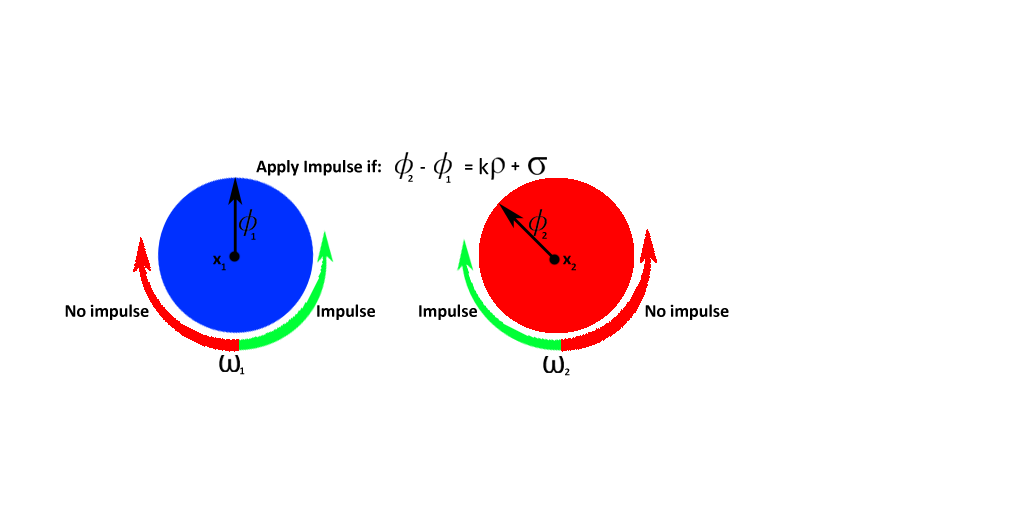
<style>
.page{position:relative;width:1024px;height:512px;background:#ffffff}
.page>*{position:absolute;margin:0}
.t1{font:18px "Calibri-Bold";color:#000000}
.t2{font:24px "Calibri";color:#000000}
</style>
<div class="page">
<p class="t1" style="left:256px;top:159px;width:125px;height:17px">Apply Impulse if:</p>
<p class="t2" style="left:479px;top:158px;width:10px;height:17px">k</p>
<p class="t1" style="left:420px;top:164px;width:53px;height:6px">-   =</p>
<p class="t1" style="left:511px;top:162px;width:9px;height:9px">+</p>
<p class="t1" style="left:213px;top:255px;width:13px;height:16px">x1</p>
<p class="t1" style="left:563px;top:255px;width:13px;height:16px">x2</p>
<p class="t1" style="left:65px;top:304px;width:84px;height:16px">No impulse</p>
<p class="t1" style="left:317px;top:304px;width:58px;height:16px">Impulse</p>
<p class="t1" style="left:419px;top:304px;width:58px;height:16px">Impulse</p>
<p class="t1" style="left:645px;top:304px;width:84px;height:16px">No impulse</p>
<p class="t1" style="left:240px;top:367px;width:5px;height:8px">1</p>
<p class="t1" style="left:565px;top:368px;width:5px;height:8px">2</p>
</div>
